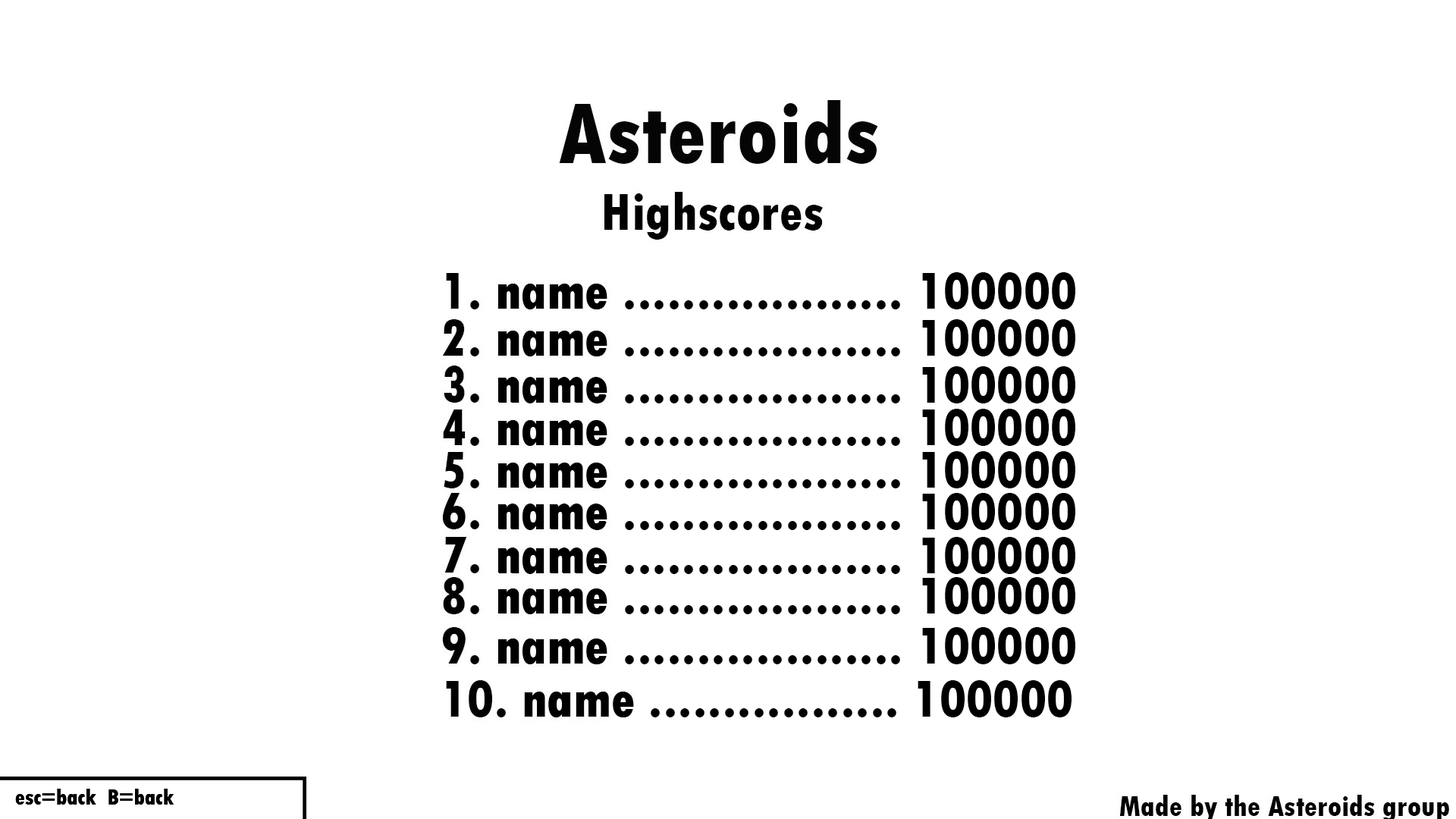
<style>
.page{position:relative;width:1456px;height:819px;background:#ffffff}
.page>*{position:absolute;margin:0}
.t1{font:54.6px "TwCenMT-CondensedExtraBold";color:#000000}
.t2{font:22.7px "TwCenMT-CondensedExtraBold";color:#000000}
</style>
<div class="page">
<p class="t1" style="left:498px;top:272px;width:577px;height:37px">name ................... 100000</p>
<p class="t1" style="left:498px;top:319px;width:577px;height:37px">name ................... 100000</p>
<p class="t1" style="left:498px;top:366px;width:577px;height:37px">name ................... 100000</p>
<p class="t1" style="left:498px;top:409px;width:577px;height:37px">name ................... 100000</p>
<p class="t1" style="left:498px;top:451px;width:577px;height:37px">name ................... 100000</p>
<p class="t1" style="left:498px;top:493px;width:577px;height:37px">name ................... 100000</p>
<p class="t1" style="left:498px;top:537px;width:577px;height:37px">name ................... 100000</p>
<p class="t1" style="left:498px;top:577px;width:577px;height:37px">name ................... 100000</p>
<p class="t1" style="left:498px;top:627px;width:577px;height:37px">name ................... 100000</p>
<p class="t1" style="left:524px;top:680px;width:548px;height:37px">name ................. 100000</p>
<p class="t2" style="left:15px;top:789px;width:159px;height:16px">esc=back  B=back</p>
<p class="t2" style="left:15px;top:789px;width:159px;height:16px">esc=back  B=back</p>
<p class="t2" style="left:15px;top:789px;width:159px;height:16px">esc=back  B=back</p>
</div>
